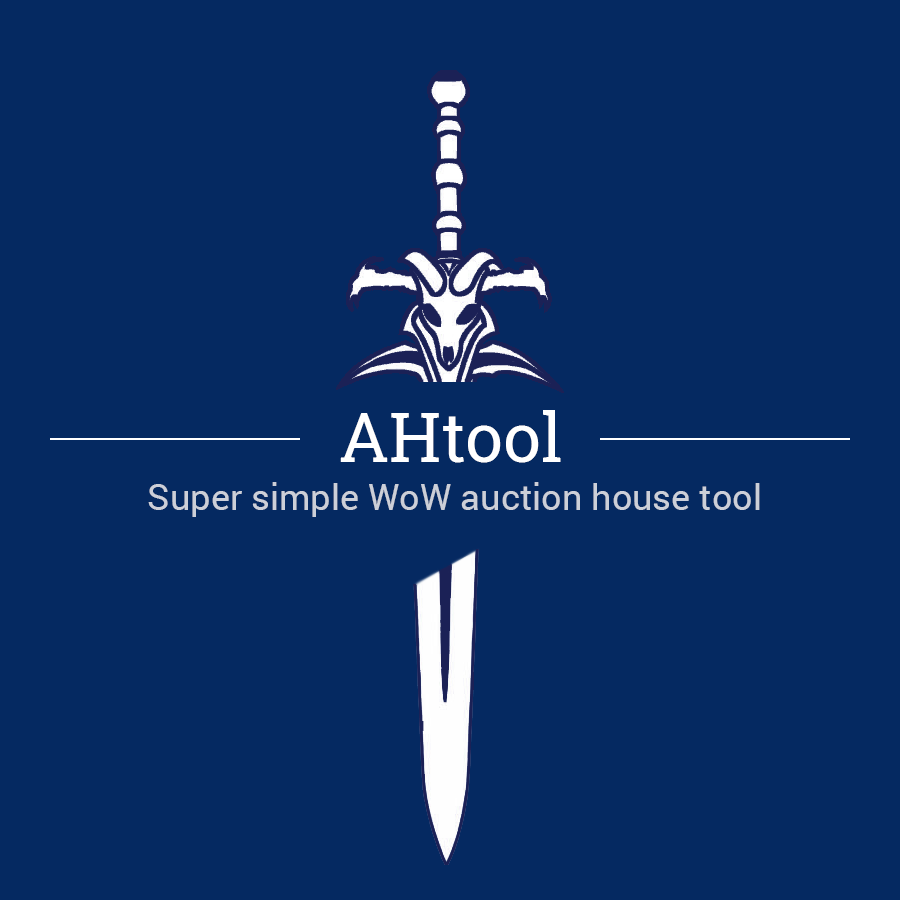
<style>
.page{position:relative;width:900px;height:900px;background:#052961}
.page>*{position:absolute;margin:0}
.t1{font:68px "RobotoSlab-Regular";color:#ffffff}
.t2{font:36px "Roboto-Regular";color:#cccfd8}
</style>
<div class="page">
<p class="t1" style="left:340px;top:410px;width:221px;height:53px">AHtool</p>
<p class="t2" style="left:148px;top:482px;width:612px;height:35px">Super simple WoW auction house tool</p>
</div>
